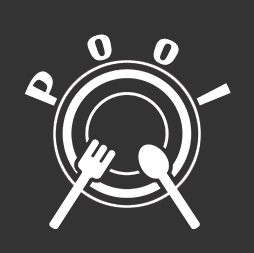
<style>
.page{position:relative;width:254px;height:253px;background:#333333}
.page>*{position:absolute;margin:0}
.t1{font:36px/63.6px "FjallaOne-Regular";letter-spacing:0.01em;color:#ffffff}
</style>
<div class="page">
<p class="t1" style="left:25px;top:34px;width:206px;height:72px">P   o   o   l</p>
</div>
